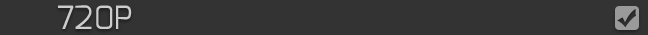
<style>
.page{position:relative;width:648px;height:35px;background:#333333}
.page>*{position:absolute;margin:0}
.t1{font:32px "Exo-Regular";color:#cccccc;text-transform:uppercase}
</style>
<div class="page">
<p class="t1" style="left:58px;top:5px;width:74px;height:24px">720p</p>
</div>
